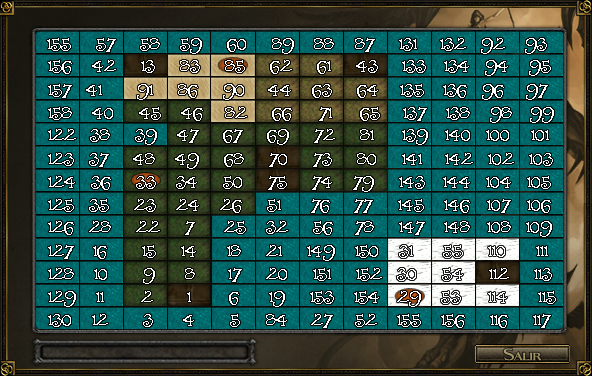
<style>
.page{position:relative;width:592px;height:376px}
.page>*{position:absolute;margin:0}
.t1{font:14px "Folkard";color:#ffffff}
.t2{font:30px "Fleet-Street";color:#a19466}
</style>
<div class="page">
<p class="t1" style="left:47px;top:38px;width:500px;height:16px">155     57     58    59     60     89    88     87     131     132   92    93</p>
<p class="t1" style="left:48px;top:60px;width:503px;height:16px">156    42     13     83     85     62     61     43     133    134   94    95</p>
<p class="t1" style="left:48px;top:84px;width:500px;height:16px">157   41       91     86     90     44    63     64     135    136   96    97</p>
<p class="t1" style="left:48px;top:107px;width:506px;height:16px">158    40     45    46     82     66      71      65     137    138    98    99</p>
<p class="t1" style="left:48px;top:129px;width:501px;height:16px">122   38     39    47     67     69     72     81      139    140   100     101</p>
<p class="t1" style="left:48px;top:153px;width:505px;height:16px">123   37     48    49     68     70     73     80     141     142   102   103</p>
<p class="t1" style="left:48px;top:176px;width:503px;height:16px">124   36     33    34     50     75     74    79     143    144   104   105</p>
<p class="t1" style="left:48px;top:199px;width:503px;height:14px">125   35     23    24    26     51      76     77     145    146    107    106</p>
<p class="t1" style="left:48px;top:221px;width:504px;height:16px">126   28     22     7      25    32     56     78     147    148   108   109</p>
<p class="t1" style="left:48px;top:245px;width:500px;height:16px">127    16       15     14      18     21     149    150    31      55     110      111</p>
<p class="t1" style="left:48px;top:268px;width:504px;height:16px">128    10       9      8       17     20     151     152   30     54     112     113</p>
<p class="t1" style="left:48px;top:291px;width:508px;height:16px">129    11        2       1        6      19     153    154    29    53     114      115</p>
<p class="t1" style="left:48px;top:314px;width:503px;height:14px">130    12       3      4       5      84     27     52    155    156     116     117</p>
<p class="t2" style="left:503px;top:348px;width:39px;height:13px">Salir</p>
</div>
